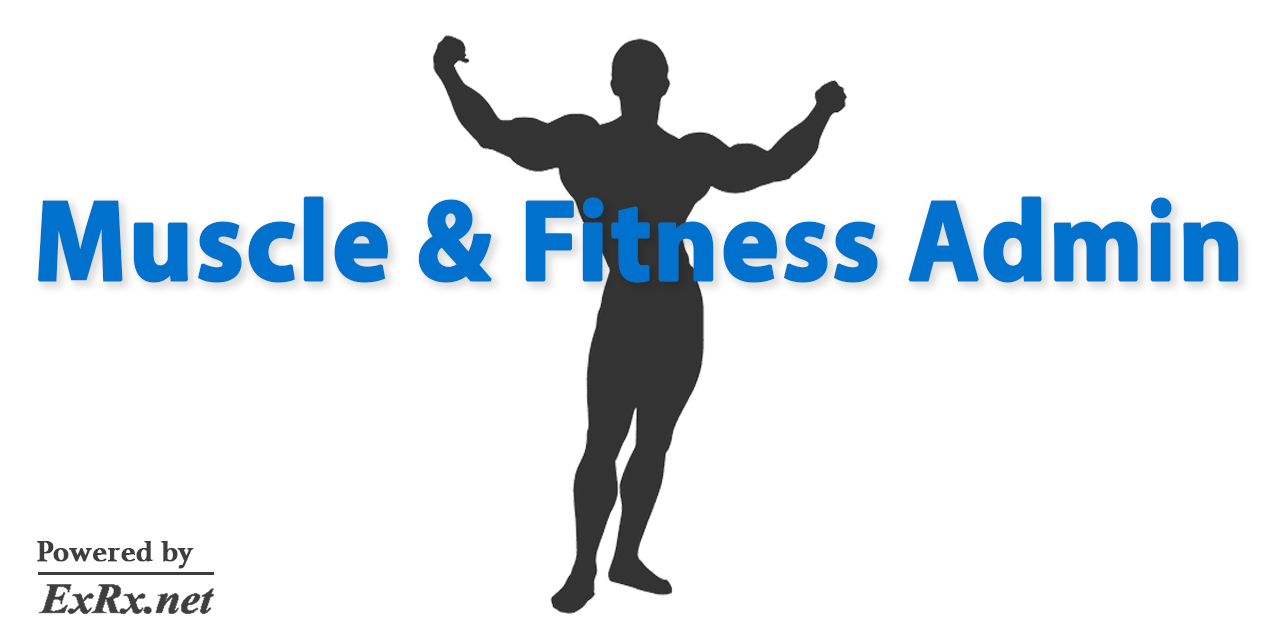
<style>
.page{position:relative;width:1280px;height:640px;background:#ffffff}
.page>*{position:absolute;margin:0}
.t1{font:115.2px "MyriadPro-Bold";color:#0071cc;font-weight:bold;scale:0.95 1}
.t2{font:30px "Athelas-Bold";color:#3e3e3e;font-weight:bold}
</style>
<div class="page">
<p class="t1" style="left:38px;top:196px;width:1201px;height:87px">Muscle &amp; Fitness Admin</p>
<p class="t2" style="left:37px;top:541px;width:157px;height:28px">Powered by</p>
</div>
